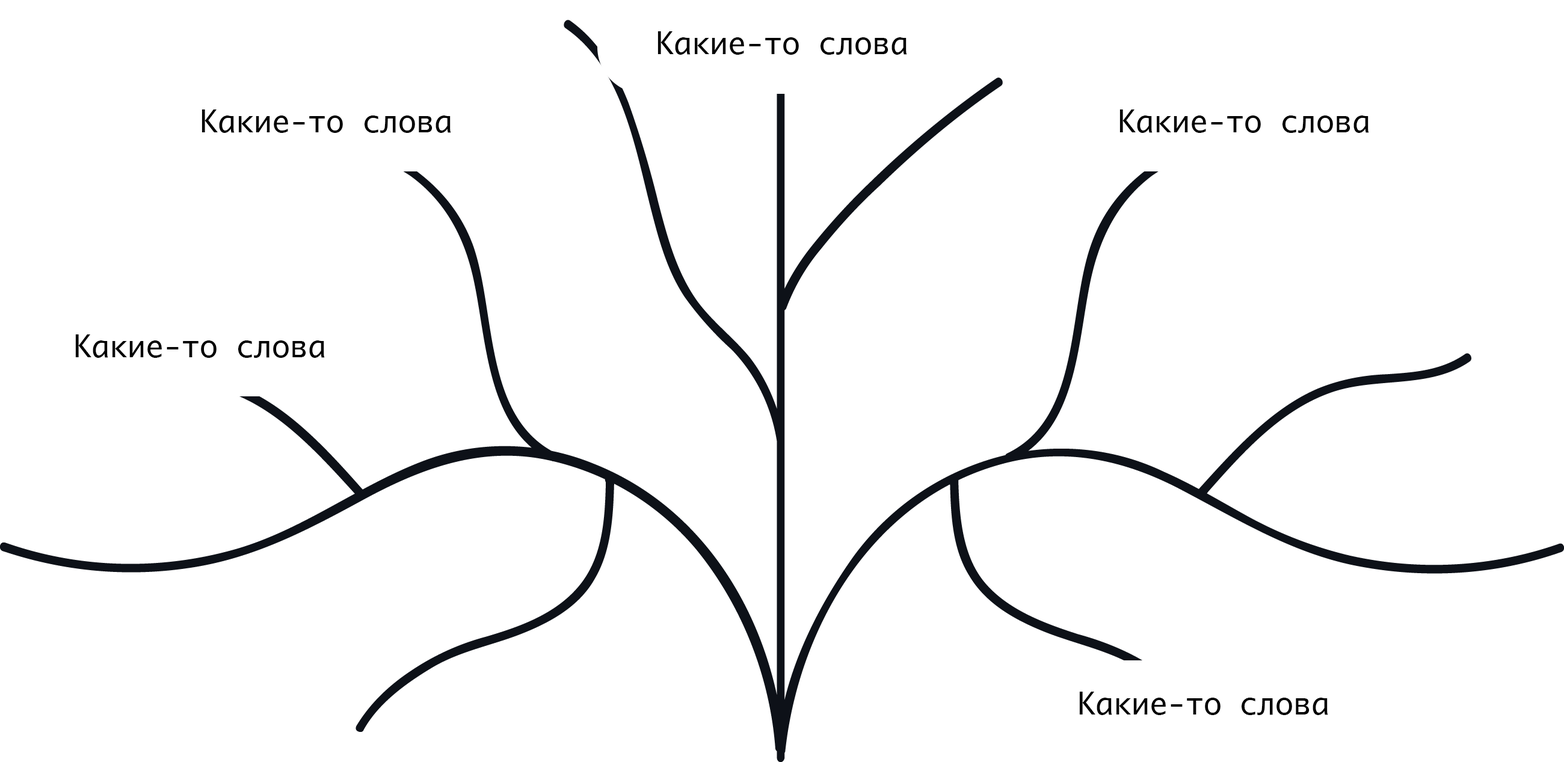
<style>
.page{position:relative;width:1564px;height:762px;background:#ffffff}
.page>*{position:absolute;margin:0}
.t1{font:30.1px "Ayuthaya";color:#000000}
</style>
<div class="page">
<p class="t1" style="left:658px;top:31px;width:249px;height:24px">Какие-то слова</p>
<p class="t1" style="left:202px;top:109px;width:249px;height:24px">Какие-то слова</p>
<p class="t1" style="left:1120px;top:109px;width:249px;height:24px">Какие-то слова</p>
<p class="t1" style="left:75px;top:335px;width:250px;height:23px">Какие-то слова</p>
<p class="t1" style="left:1079px;top:692px;width:249px;height:23px">Какие-то слова</p>
</div>
